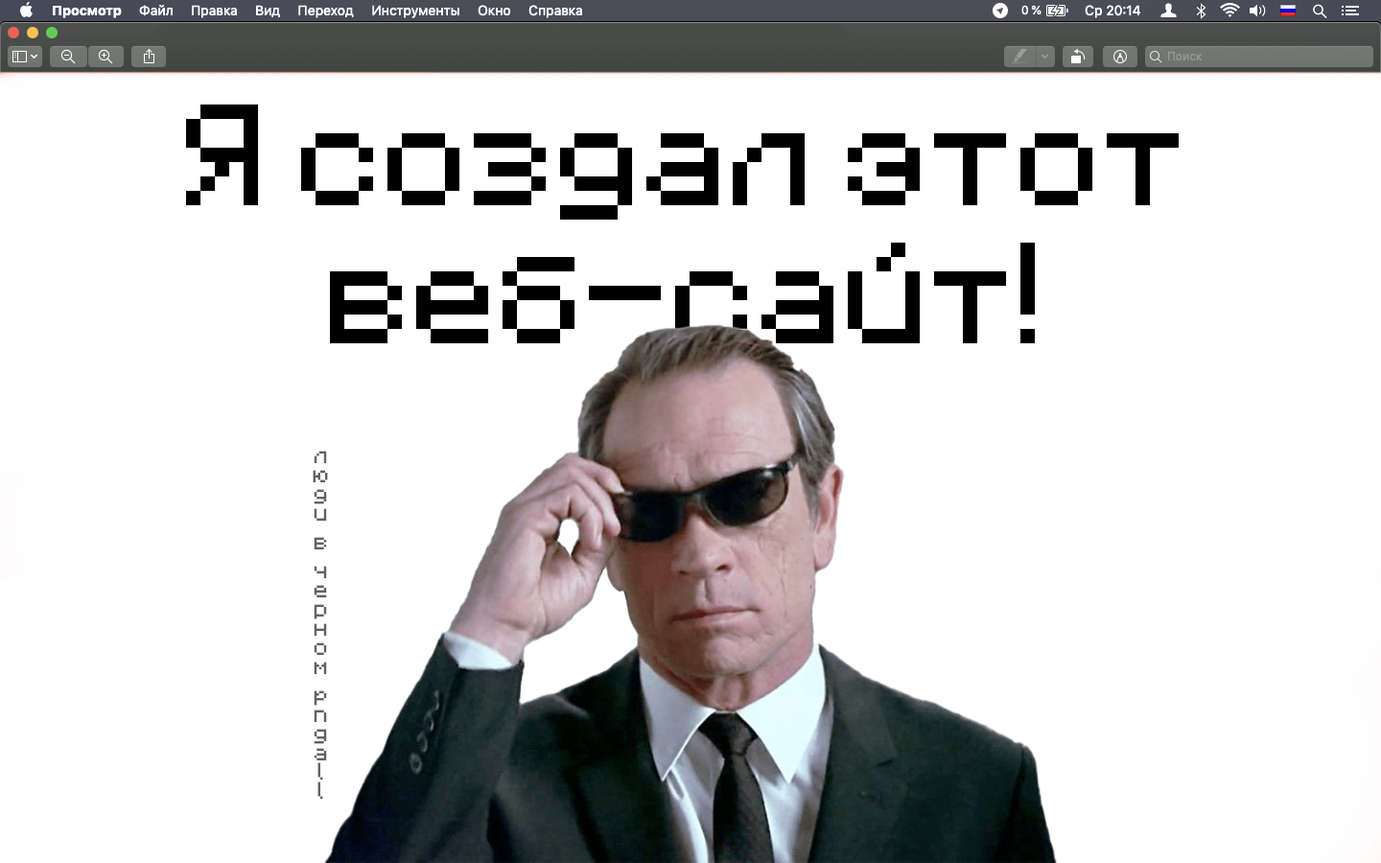
<style>
.page{position:relative;width:1381px;height:863px;background:#ffffff}
.page>*{position:absolute;margin:0}
.t1{font:115.1px "Minecraft";color:#000000}
.t2{font:19.2px "Minecraft";color:#626262}
</style>
<div class="page">
<p class="t1" style="left:186px;top:105px;width:993px;height:238px;text-align:center">Я создал этот веб-сайт!</p>
<p class="t2" style="left:313px;top:451px;width:15px;height:348px;text-align:center">люди  в  черном  pngall</p>
</div>
